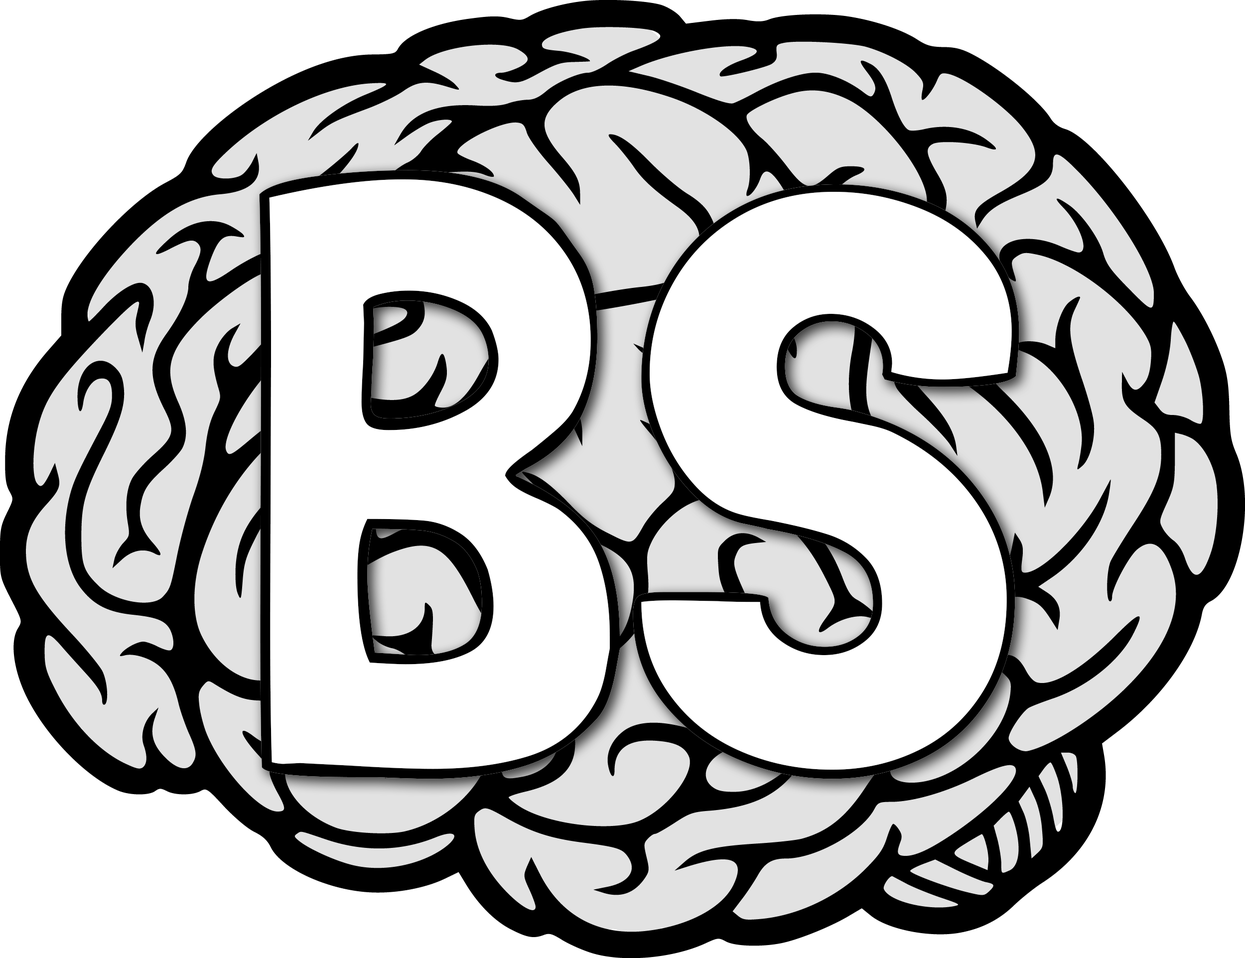
<style>
.page{position:relative;width:1245px;height:958px;background:#ffffff}
.page>*{position:absolute;margin:0}
.t1{font:830.2px "LondrinaOutline-Regular";color:#000000}
</style>
<div class="page">
<p class="t1" style="left:259px;top:170px;width:760px;height:609px">BS</p>
</div>
